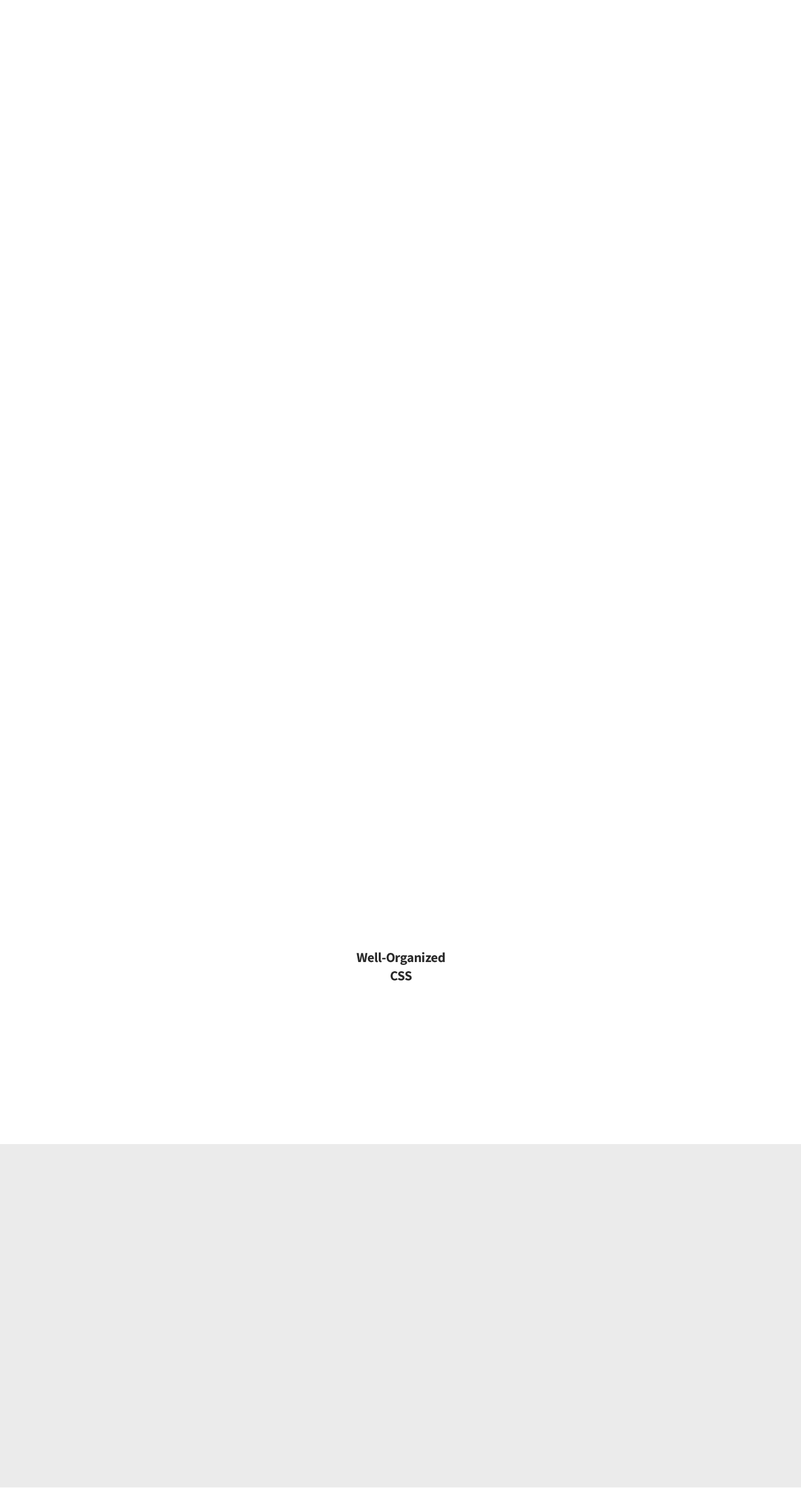
<style>
.page{position:relative;width:801px;height:1488px;background:#ffffff}
.page>*{position:absolute;margin:0}
.t1{font:13.7px/18.3px "SourceSansPro-Bold";letter-spacing:-0.02em;color:#2b2b2b}
</style>
<div class="page">
<p class="t1" style="left:357px;top:952px;width:88px;height:29px;text-align:center">Well-Organized<br>CSS</p>
</div>
